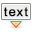
<style>
.page{position:relative;width:32px;height:32px;background:#ffffff}
.page>*{position:absolute;margin:0}
.t1{font:12.5px "ArialMT";letter-spacing:0.075em;color:#000000;font-weight:bold}
</style>
<div class="page">
<p class="t1" style="left:4px;top:7px;width:24px;height:10px">text</p>
</div>
